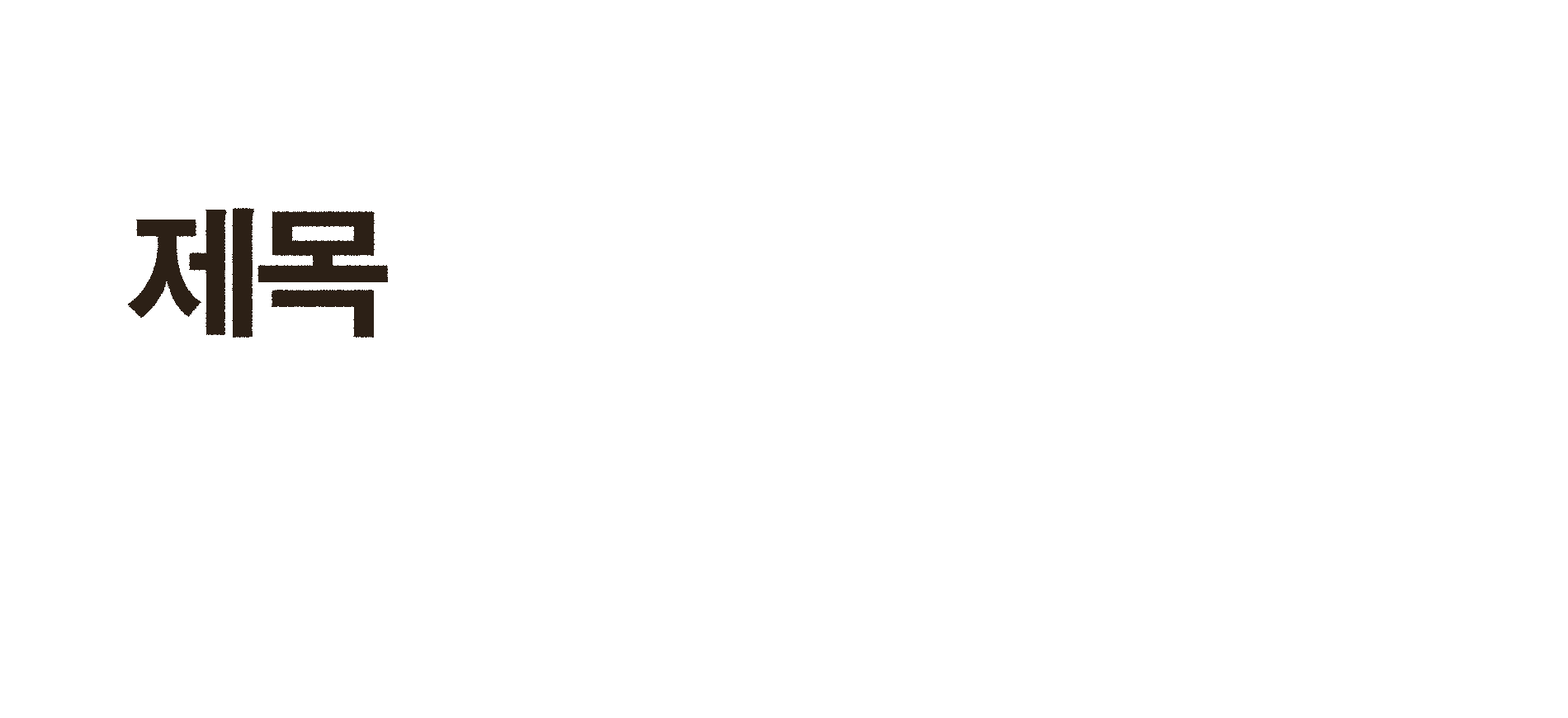
<style>
.page{position:relative;width:1568px;height:718px;background:#ffffff}
.page>*{position:absolute;margin:0}
.t1{font:137.5px "AdobeGothicStd-Bold";letter-spacing:-0.05em;color:#2c2016}
</style>
<div class="page">
<p class="t1" style="left:127px;top:208px;width:261px;height:130px">제목</p>
</div>
